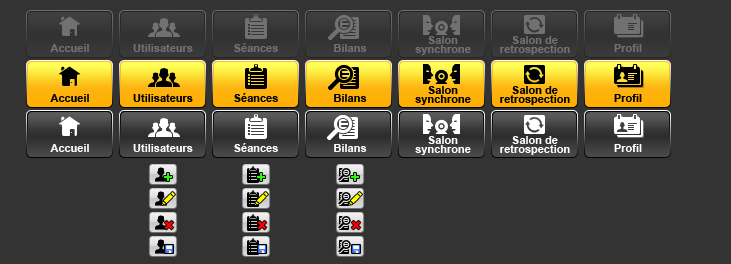
<style>
.page{position:relative;width:731px;height:264px;background:#333333}
.page>*{position:absolute;margin:0}
.t1{font:11px/9px "Arial-BoldMT";color:#717171}
.t2{font:11px "Arial-BoldMT";color:#717171}
.t3{font:11px/9px "Arial-BoldMT";color:#000000}
.t4{font:11px "Arial-BoldMT";color:#000000}
.t5{font:11px/9px "Arial-BoldMT";color:#ffffff}
.t6{font:11px "Arial-BoldMT";color:#ffffff}
.t7{font:14px "Arial-BoldMT";color:#24ff00}
.t8{font:19.3px "Arial-BoldMT";color:#ff0000}
</style>
<div class="page">
<p class="t1" style="left:415px;top:36px;width:56px;height:19px;text-align:center">Salon<br>synchrone</p>
<p class="t1" style="left:500px;top:36px;width:70px;height:19px;text-align:center">Salon de<br>retrospection</p>
<p class="t2" style="left:50px;top:44px;width:39px;height:8px">Accueil</p>
<p class="t2" style="left:133px;top:44px;width:60px;height:8px">Utilisateurs</p>
<p class="t2" style="left:234px;top:43px;width:44px;height:9px">Séances</p>
<p class="t2" style="left:334px;top:44px;width:33px;height:8px">Bilans</p>
<p class="t2" style="left:614px;top:44px;width:28px;height:8px">Profil</p>
<p class="t3" style="left:415px;top:86px;width:56px;height:19px;text-align:center">Salon<br>synchrone</p>
<p class="t3" style="left:500px;top:86px;width:70px;height:19px;text-align:center">Salon de<br>retrospection</p>
<p class="t4" style="left:50px;top:94px;width:39px;height:8px">Accueil</p>
<p class="t4" style="left:133px;top:94px;width:60px;height:8px">Utilisateurs</p>
<p class="t4" style="left:234px;top:93px;width:44px;height:9px">Séances</p>
<p class="t4" style="left:334px;top:94px;width:33px;height:8px">Bilans</p>
<p class="t4" style="left:614px;top:94px;width:28px;height:8px">Profil</p>
<p class="t5" style="left:415px;top:136px;width:56px;height:19px;text-align:center">Salon<br>synchrone</p>
<p class="t5" style="left:500px;top:136px;width:70px;height:19px;text-align:center">Salon de<br>retrospection</p>
<p class="t6" style="left:50px;top:144px;width:39px;height:8px">Accueil</p>
<p class="t6" style="left:133px;top:144px;width:60px;height:8px">Utilisateurs</p>
<p class="t6" style="left:234px;top:143px;width:44px;height:9px">Séances</p>
<p class="t6" style="left:334px;top:144px;width:33px;height:8px">Bilans</p>
<p class="t6" style="left:614px;top:144px;width:28px;height:8px">Profil</p>
<p class="t7" style="left:164px;top:173px;width:8px;height:8px">+</p>
<p class="t7" style="left:257px;top:173px;width:8px;height:8px">+</p>
<p class="t7" style="left:351px;top:173px;width:8px;height:8px">+</p>
<p class="t8" style="left:164px;top:221px;width:10px;height:9px;rotate:-45deg">+</p>
<p class="t8" style="left:257px;top:221px;width:10px;height:9px;rotate:-45deg">+</p>
<p class="t8" style="left:351px;top:221px;width:10px;height:9px;rotate:-45deg">+</p>
</div>
